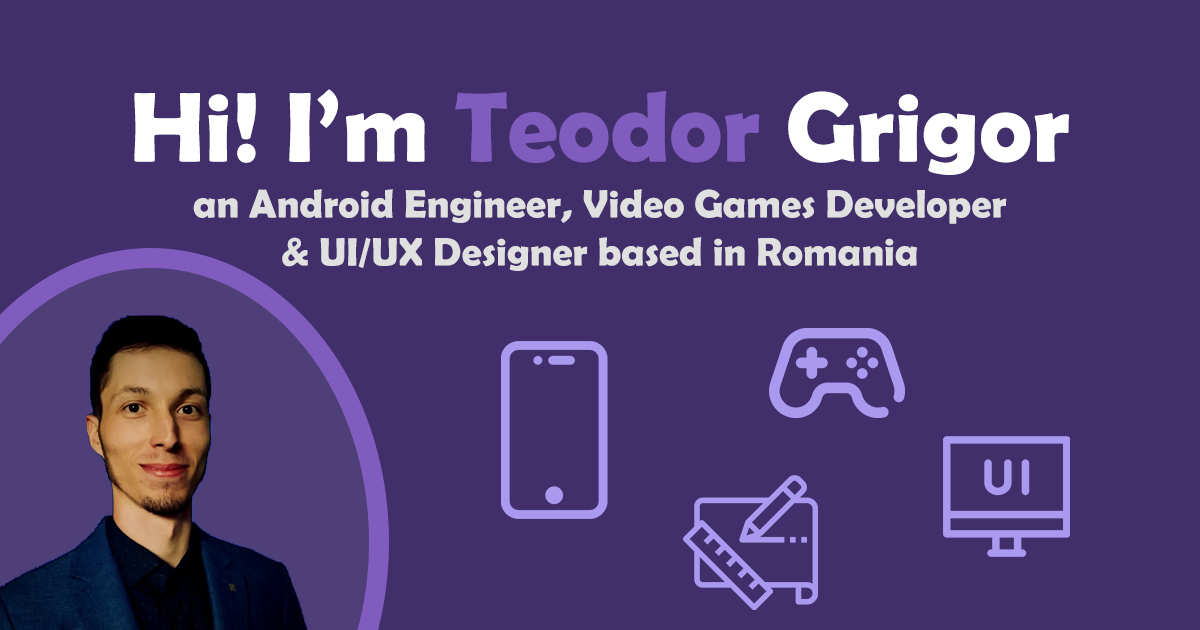
<style>
.page{position:relative;width:1200px;height:630px;background:#402f6a}
.page>*{position:absolute;margin:0}
.t1{font:100px "BerlinSansFBDemi-Bold";color:#ffffff}
.t2{font:100px "BerlinSansFBDemi-Bold";color:#815cbf}
.t3{font:40px "BerlinSansFBDemi-Bold";color:#e0e0e0}
</style>
<div class="page">
<p class="t1" style="left:134px;top:89px;width:935px;height:86px">Hi! I’m <span class="t2">Teodor</span> Grigor</p>
<p class="t3" style="left:193px;top:189px;width:814px;height:82px;text-align:center">an Android Engineer, Video Games Developer<br>&amp; UI/UX Designer based in Romania</p>
</div>
